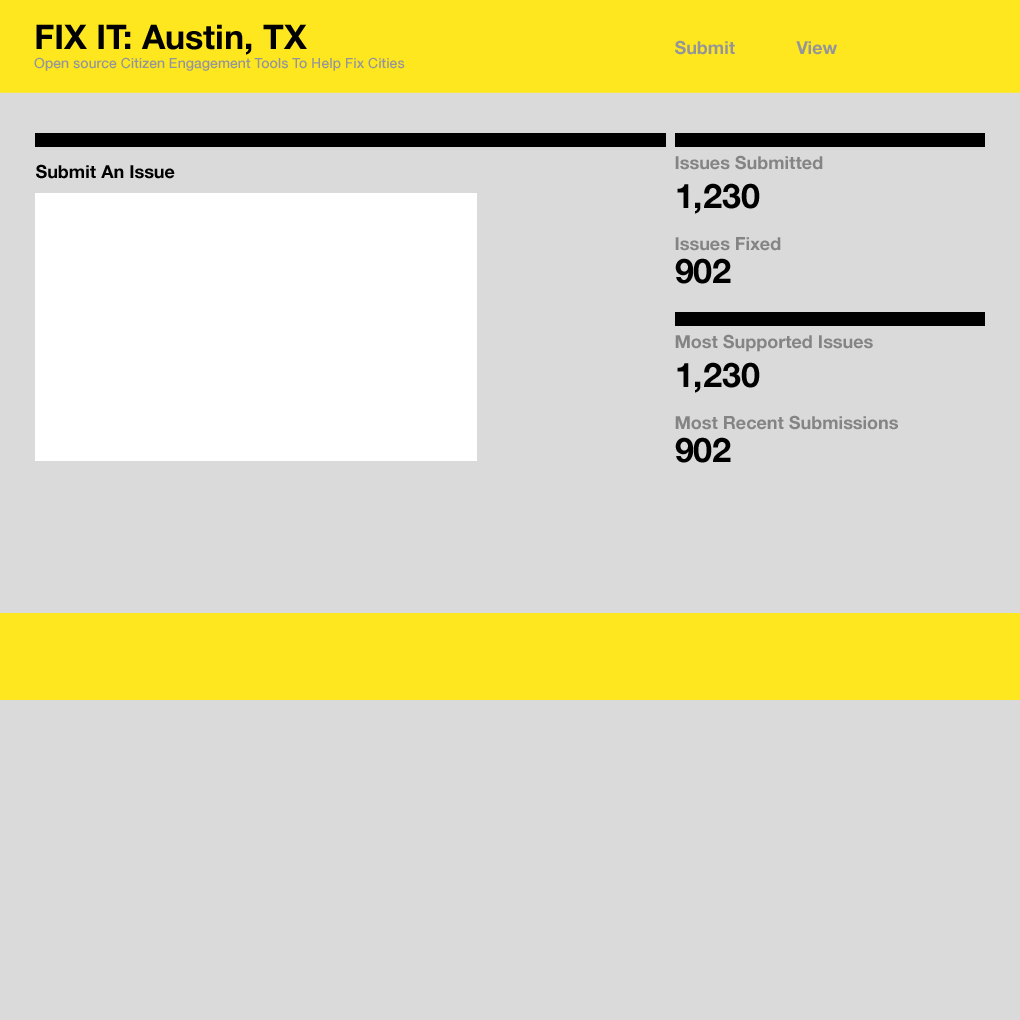
<style>
.page{position:relative;width:1020px;height:1020px;background:#dadada}
.page>*{position:absolute;margin:0}
.t1{font:34px "HelveticaNeue-Bold";color:#000000}
.t2{font:18px "HelveticaNeue-Bold";color:#939598}
.t3{font:14px "HelveticaNeue-Medium";color:#939598}
.t4{font:18px "HelveticaNeue-Bold";color:#848484}
.t5{font:18px "HelveticaNeue-Bold";color:#000000}
</style>
<div class="page">
<p class="t1" style="left:36px;top:24px;width:271px;height:31px">FIX IT: Austin, TX</p>
<p class="t2" style="left:675px;top:40px;width:60px;height:15px">Submit</p>
<p class="t2" style="left:796px;top:41px;width:41px;height:14px">View</p>
<p class="t3" style="left:34px;top:57px;width:371px;height:14px">Open source Citizen Engagement Tools To Help Fix Cities</p>
<p class="t4" style="left:675px;top:155px;width:148px;height:15px">Issues Submitted</p>
<p class="t5" style="left:36px;top:164px;width:139px;height:15px">Submit An Issue</p>
<p class="t1" style="left:677px;top:183px;width:83px;height:31px">1,230</p>
<p class="t4" style="left:675px;top:237px;width:106px;height:14px">Issues Fixed</p>
<p class="t1" style="left:675px;top:258px;width:56px;height:26px">902</p>
<p class="t4" style="left:675px;top:334px;width:198px;height:18px">Most Supported Issues</p>
<p class="t1" style="left:677px;top:362px;width:83px;height:31px">1,230</p>
<p class="t4" style="left:675px;top:415px;width:223px;height:15px">Most Recent Submissions</p>
<p class="t1" style="left:675px;top:437px;width:56px;height:26px">902</p>
</div>
